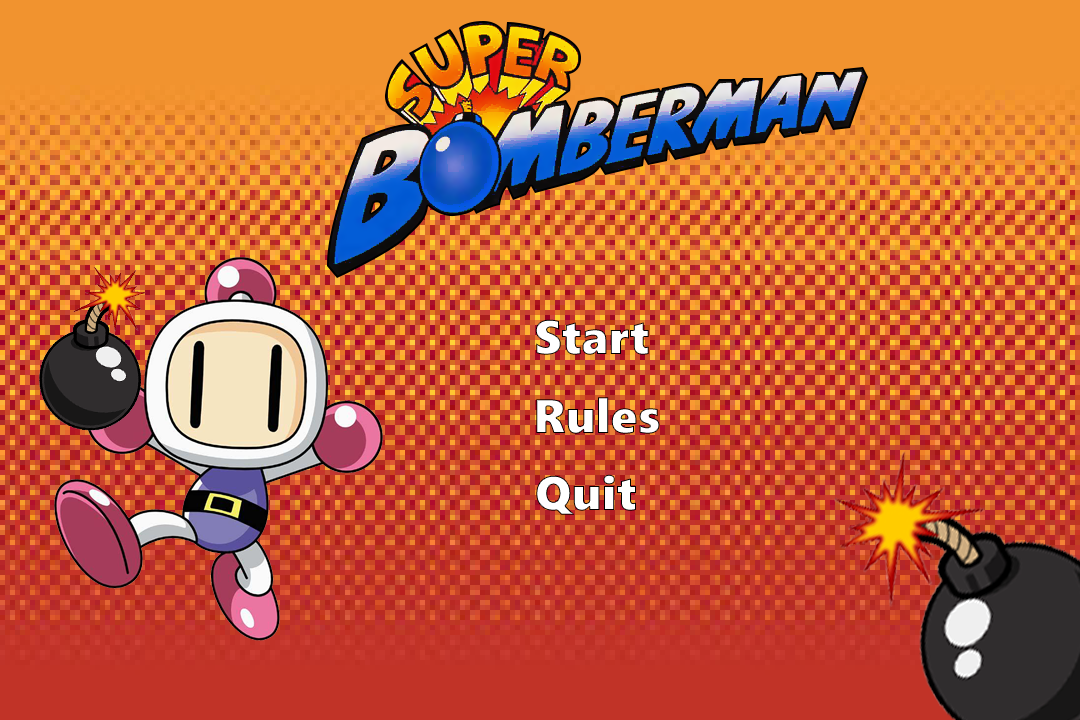
<style>
.page{position:relative;width:1080px;height:720px}
.page>*{position:absolute;margin:0}
.t1{font:48px "SegoeUIBlack";color:#ffffff}
</style>
<div class="page">
<p class="t1" style="left:535px;top:319px;width:114px;height:36px">Start</p>
<p class="t1" style="left:536px;top:397px;width:124px;height:37px">Rules</p>
<p class="t1" style="left:536px;top:474px;width:100px;height:41px">Quit</p>
</div>
